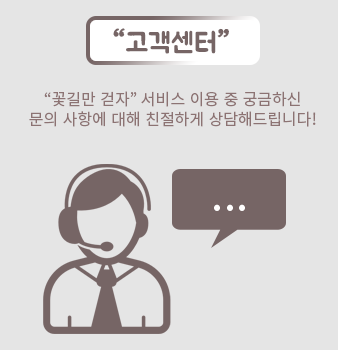
<style>
.page{position:relative;width:338px;height:350px;background:#e5e5e5}
.page>*{position:absolute;margin:0}
.t1{font:28px "BMJUA";color:#766565}
.t2{font:28px "BMEuljiro10yearslater";color:#766565}
.t3{font:16px "NotoSansKR-Regular";color:#8c7373}
.t4{font:45px "NotoSansKR-Regular";color:#fffefe}
</style>
<div class="page">
<p class="t1" style="left:113px;top:28px;width:116px;height:26px"><span class="t2">“</span>고객센터<span class="t2">”</span></p>
<p class="t3" style="left:29px;top:91px;width:287px;height:36px;text-align:center">“꽃길만 걷자” 서비스 이용 중 궁금하신<br>문의 사항에 대해 친절하게 상담해드립니다!</p>
<p class="t4" style="left:214px;top:204px;width:31px;height:7px">...</p>
</div>
